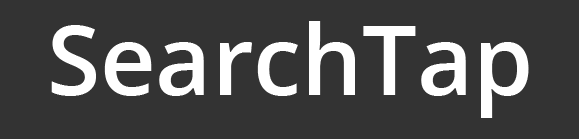
<style>
.page{position:relative;width:579px;height:139px;background:#333333}
.page>*{position:absolute;margin:0}
.t1{font:96.7px "OpenSans-Semibold";color:#ffffff}
</style>
<div class="page">
<p class="t1" style="left:51px;top:21px;width:478px;height:97px">SearchTap</p>
</div>
